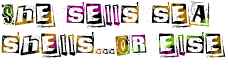
<style>
.page{position:relative;width:228px;height:66px;background:#ffffff}
.page>*{position:absolute;margin:0}
.t1{font:25px "KingthingsExtortion-"}
</style>
<div class="page">
<p class="t1" style="left:1px;top:1px;width:225px;height:57px">She sells sea<br>shells...or else</p>
</div>
